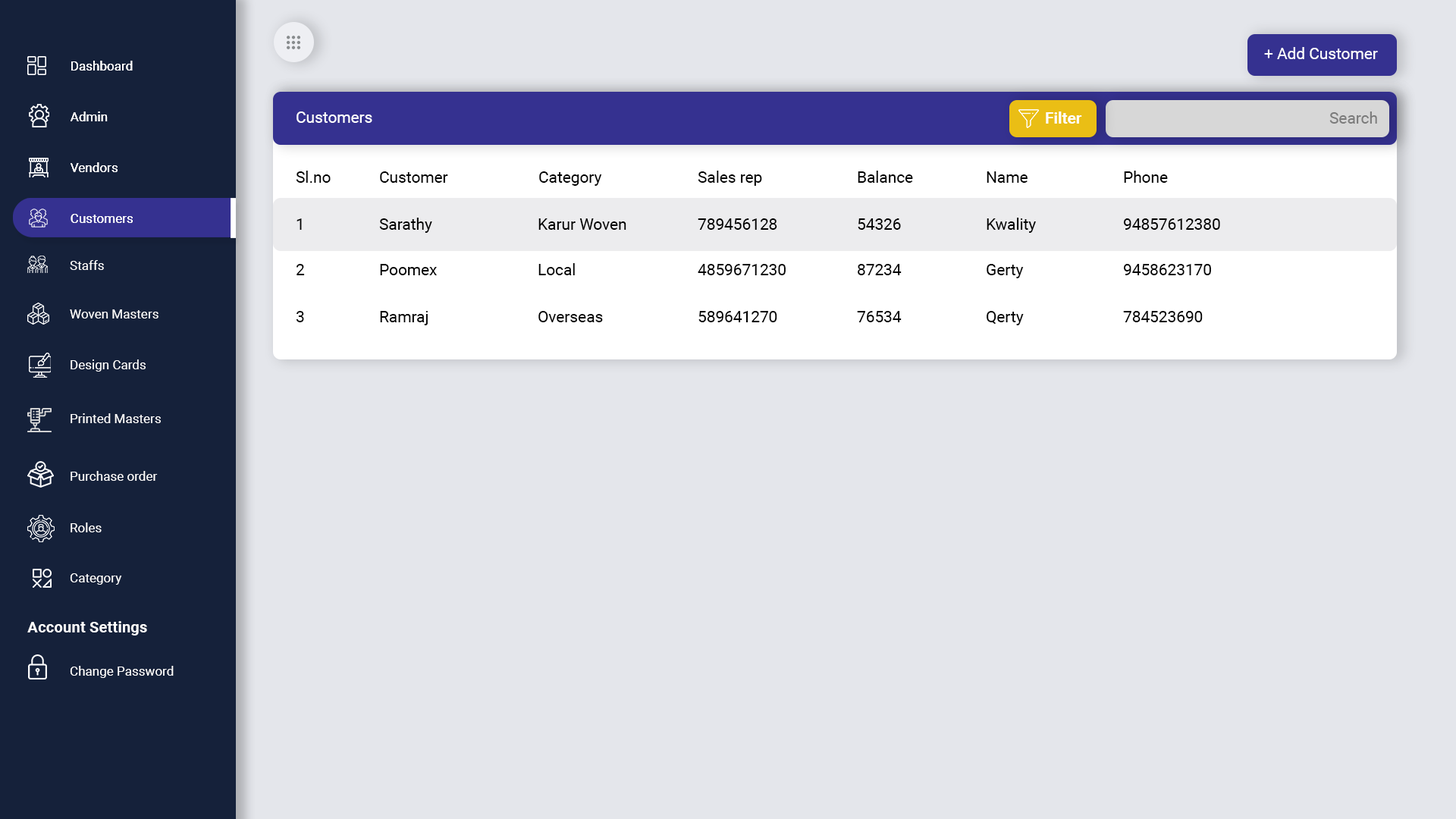
<style>
.page{position:relative;width:1456px;height:819px;background:#e4e6eb}
.page>*{position:absolute;margin:0}
.t1{font:15.8px "Roboto-Regular";color:#ffffff}
.t2{font:12.9px "Roboto-Regular";color:#ffffff}
.t3{font:15.8px "Roboto-Bold";color:#ffffff}
.t4{font:15.8px "Roboto-Regular";color:#7b7b7b}
.t5{font:15.8px "Roboto-Regular";color:#000000}
.t6{font:15.5px "Roboto-Bold";color:#ffffff}
</style>
<div class="page">
<p class="t1" style="left:1264px;top:47px;width:114px;height:12px">+ Add Customer</p>
<p class="t2" style="left:71px;top:61px;width:62px;height:10px">Dashboard</p>
<p class="t2" style="left:71px;top:61px;width:62px;height:10px">Dashboard</p>
<p class="t2" style="left:71px;top:111px;width:37px;height:10px">Admin</p>
<p class="t2" style="left:71px;top:111px;width:37px;height:10px">Admin</p>
<p class="t1" style="left:297px;top:111px;width:75px;height:12px">Customers</p>
<p class="t3" style="left:1046px;top:111px;width:36px;height:13px">Filter</p>
<p class="t4" style="left:1329px;top:111px;width:48px;height:13px">Search</p>
<p class="t2" style="left:71px;top:162px;width:47px;height:10px">Vendors</p>
<p class="t2" style="left:71px;top:162px;width:47px;height:10px">Vendors</p>
<p class="t5" style="left:296px;top:171px;width:35px;height:12px">Sl.no</p>
<p class="t5" style="left:380px;top:171px;width:68px;height:12px">Customer</p>
<p class="t5" style="left:539px;top:171px;width:63px;height:15px">Category</p>
<p class="t5" style="left:698px;top:171px;width:64px;height:15px">Sales rep</p>
<p class="t5" style="left:858px;top:171px;width:55px;height:12px">Balance</p>
<p class="t5" style="left:987px;top:171px;width:41px;height:12px">Name</p>
<p class="t5" style="left:1124px;top:171px;width:44px;height:12px">Phone</p>
<p class="t2" style="left:71px;top:214px;width:62px;height:9px">Customers</p>
<p class="t2" style="left:71px;top:214px;width:62px;height:9px">Customers</p>
<p class="t5" style="left:297px;top:218px;width:5px;height:12px">1</p>
<p class="t5" style="left:379px;top:218px;width:53px;height:15px">Sarathy</p>
<p class="t5" style="left:538px;top:218px;width:88px;height:12px">Karur Woven</p>
<p class="t5" style="left:698px;top:218px;width:79px;height:12px">789456128</p>
<p class="t5" style="left:858px;top:218px;width:43px;height:12px">54326</p>
<p class="t5" style="left:987px;top:218px;width:49px;height:15px">Kwality</p>
<p class="t5" style="left:1123px;top:218px;width:97px;height:12px">94857612380</p>
<p class="t2" style="left:70px;top:260px;width:34px;height:10px">Staffs</p>
<p class="t5" style="left:297px;top:264px;width:8px;height:11px">2</p>
<p class="t5" style="left:380px;top:264px;width:57px;height:11px">Poomex</p>
<p class="t5" style="left:538px;top:263px;width:37px;height:12px">Local</p>
<p class="t5" style="left:698px;top:264px;width:88px;height:11px">4859671230</p>
<p class="t5" style="left:858px;top:264px;width:44px;height:11px">87234</p>
<p class="t5" style="left:987px;top:264px;width:37px;height:14px">Gerty</p>
<p class="t5" style="left:1123px;top:264px;width:88px;height:11px">9458623170</p>
<p class="t2" style="left:70px;top:309px;width:88px;height:9px">Woven Masters</p>
<p class="t5" style="left:296px;top:311px;width:8px;height:11px">3</p>
<p class="t5" style="left:380px;top:311px;width:48px;height:14px">Ramraj</p>
<p class="t5" style="left:538px;top:311px;width:65px;height:11px">Overseas</p>
<p class="t5" style="left:698px;top:311px;width:79px;height:11px">589641270</p>
<p class="t5" style="left:857px;top:311px;width:45px;height:11px">76534</p>
<p class="t5" style="left:987px;top:311px;width:37px;height:14px">Qerty</p>
<p class="t5" style="left:1123px;top:311px;width:80px;height:11px">784523690</p>
<p class="t2" style="left:71px;top:359px;width:75px;height:13px">Design Cards</p>
<p class="t2" style="left:71px;top:413px;width:90px;height:10px">Printed Masters</p>
<p class="t2" style="left:71px;top:471px;width:87px;height:10px">Purchase order</p>
<p class="t2" style="left:71px;top:522px;width:31px;height:10px">Roles</p>
<p class="t2" style="left:70px;top:573px;width:52px;height:12px">Category</p>
<p class="t6" style="left:27px;top:621px;width:120px;height:14px">Account Settings</p>
<p class="t2" style="left:70px;top:666px;width:104px;height:12px">Change Password</p>
</div>
